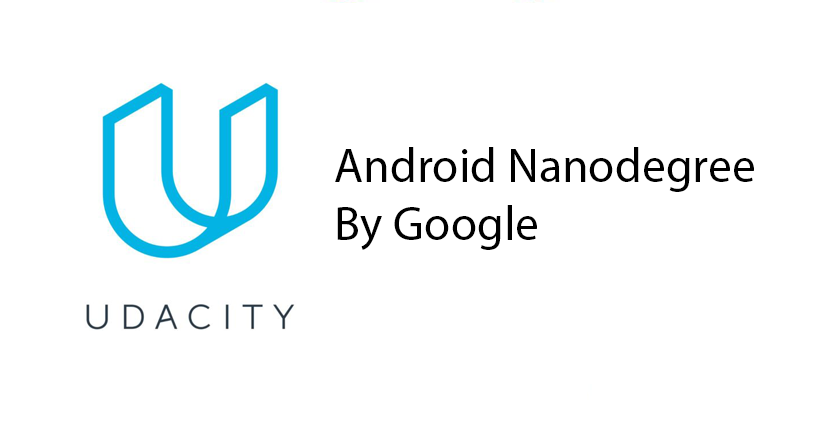
<style>
.page{position:relative;width:840px;height:437px;background:#ffffff}
.page>*{position:absolute;margin:0}
.t1{font:48px "MyriadPro-Regular";color:#000000}
</style>
<div class="page">
<p class="t1" style="left:335px;top:147px;width:419px;height:103px">Android Nanodegree<br>By Google</p>
</div>
